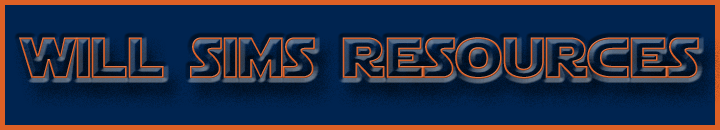
<style>
.page{position:relative;width:720px;height:130px;background:#002450}
.page>*{position:absolute;margin:0}
.t1{font:57.4px "StarJediHollow";color:#dd6026}
</style>
<div class="page">
<p class="t1" style="left:19px;top:37px;width:680px;height:42px">will sims resources</p>
</div>
